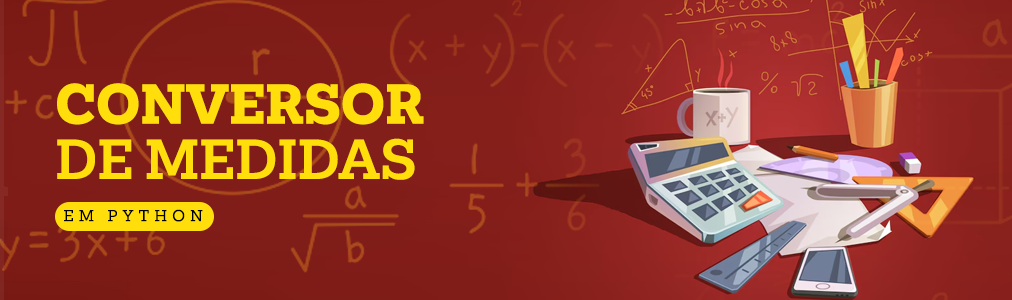
<style>
.page{position:relative;width:1012px;height:300px}
.page>*{position:absolute;margin:0}
.t1{font:51.7px/55.4px "Mokoko-Bold";color:#ffde0c;text-transform:uppercase}
.t2{font:51.7px/55.4px "Mokoko-ExtraBold";color:#ffde0c;text-transform:uppercase}
.t3{font:14.7px/42.3px "Mokoko-Regular";letter-spacing:0.34em;color:#000000;text-transform:uppercase}
</style>
<div class="page">
<p class="t1" style="left:57px;top:83px;width:367px;height:139px"><span class="t2">Conversor<br></span>de medidas<br><span class="t3"> em Python</span></p>
</div>
